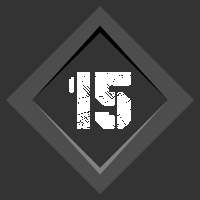
<style>
.page{position:relative;width:200px;height:200px;background:#333333}
.page>*{position:absolute;margin:0}
.t1{font:40px "GimmeDanger";color:#ffffff}
</style>
<div class="page">
<p class="t1" style="left:69px;top:72px;width:62px;height:57px">15</p>
</div>
